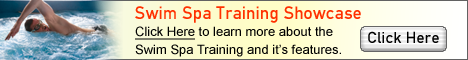
<style>
.page{position:relative;width:468px;height:60px}
.page>*{position:absolute;margin:0}
.t1{font:18px "DinC";color:#ff3000}
.t2{font:13px/18px "ArialMT";color:#000000}
.t3{font:13px/18px "ArialMT";color:#000000;text-decoration:underline}
.t4{font:16px "DinC";letter-spacing:0.015em;color:#000000}
</style>
<div class="page">
<p class="t1" style="left:135px;top:6px;width:226px;height:17px">Swim Spa Training Showcase</p>
<p class="t2" style="left:135px;top:26px;width:206px;height:31px"><span class="t3">Click Here</span> to learn more about the Swim Spa Training and it’s features.</p>
<p class="t4" style="left:368px;top:31px;width:71px;height:12px">Click Here</p>
</div>
